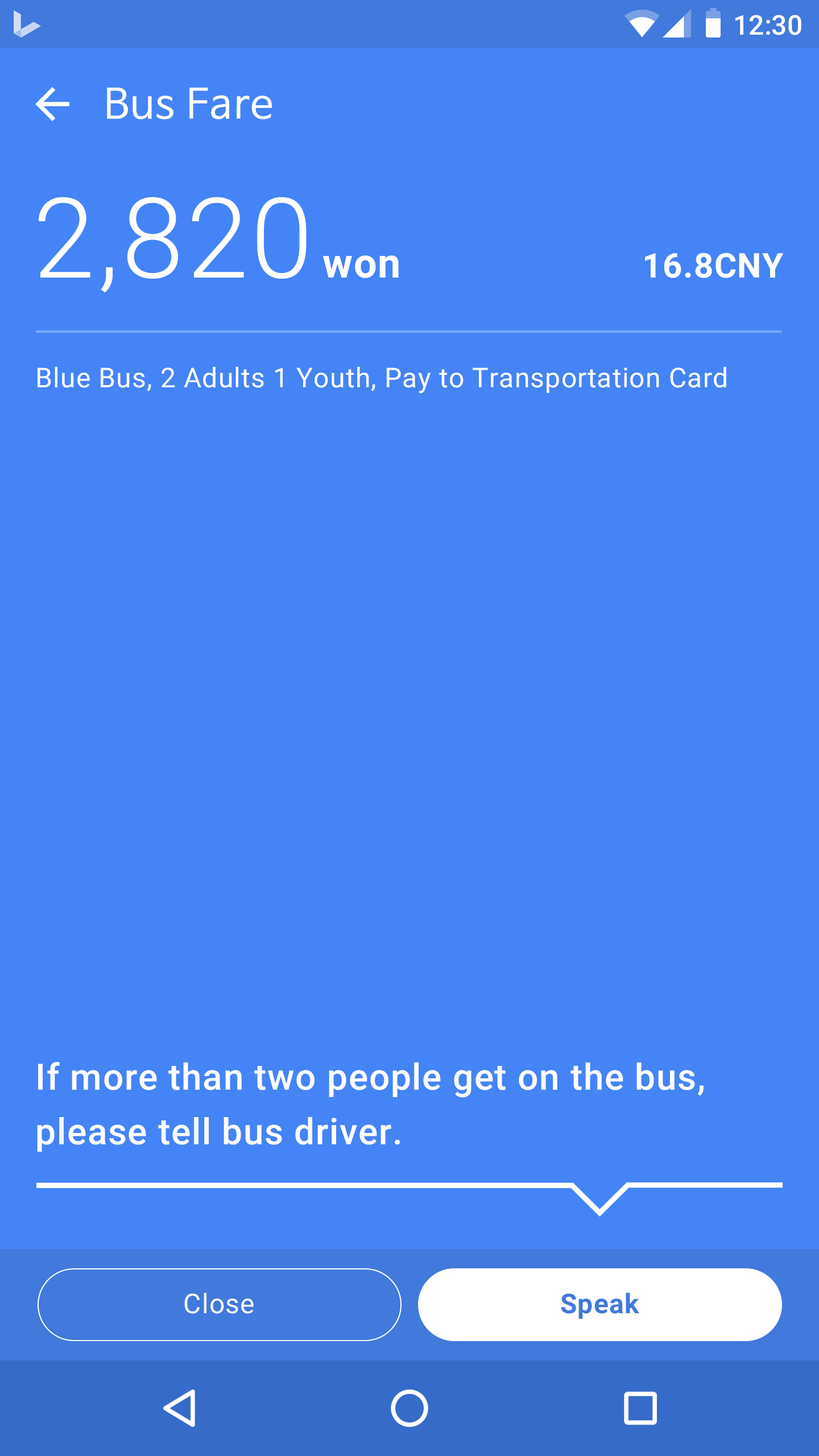
<style>
.page{position:relative;width:819px;height:1456px;background:#4484f6}
.page>*{position:absolute;margin:0}
.t1{font:27.3px "Roboto-Medium";color:#ffffff}
.t2{font:40.9px "NanumBarunGothic";letter-spacing:0.025em;color:#ffffff}
.t3{font:111.5px "Roboto-Light";letter-spacing:0.025em;color:#ffffff}
.t4{font:40.9px "Roboto-Bold";letter-spacing:0.025em;color:#ffffff}
.t5{font:34.1px "Roboto-Bold";letter-spacing:0.025em;color:#ffffff}
.t6{font:27.3px "Roboto-Regular";letter-spacing:0.025em;color:#ffffff}
.t7{font:36.4px/54.6px "Roboto-Medium";letter-spacing:0.025em;color:#ffffff}
.t8{font:27.3px "Roboto-Regular";letter-spacing:0.025em;color:#fafafa}
.t9{font:27.3px "Roboto-Bold";letter-spacing:0.025em;color:#4179dc}
</style>
<div class="page">
<p class="t1" style="left:735px;top:15px;width:66px;height:20px">12:30</p>
<p class="t2" style="left:107px;top:88px;width:165px;height:31px">Bus Fare</p>
<p class="t3" style="left:39px;top:197px;width:268px;height:96px">2,820</p>
<p class="t4" style="left:323px;top:255px;width:76px;height:23px">won</p>
<p class="t5" style="left:645px;top:253px;width:138px;height:25px">16.8CNY</p>
<p class="t6" style="left:38px;top:367px;width:688px;height:27px">Blue Bus, 2 Adults 1 Youth, Pay to Transportation Card</p>
<p class="t7" style="left:37px;top:1062px;width:667px;height:90px">If more than two people get on the bus, <br>please tell bus driver.</p>
<p class="t8" style="left:184px;top:1293px;width:70px;height:21px">Close</p>
<p class="t9" style="left:561px;top:1293px;width:78px;height:26px">Speak</p>
</div>
